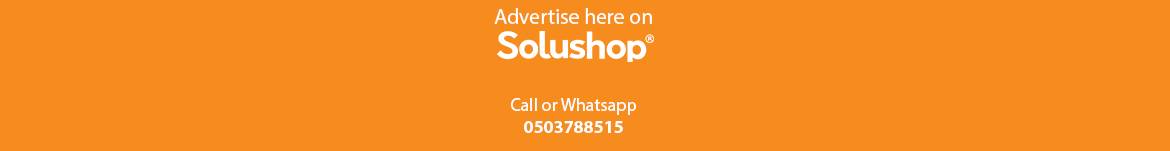
<style>
.page{position:relative;width:1170px;height:151px;background:#f68b1e}
.page>*{position:absolute;margin:0}
.t1{font:21.7px "MyriadPro-Regular";color:#ffffff}
.t2{font:18.1px "MyriadPro-Regular";color:#ffffff}
.t3{font:18.1px "MyriadPro-Bold";color:#ffffff}
</style>
<div class="page">
<p class="t1" style="left:494px;top:8px;width:158px;height:16px">Advertise here on</p>
<p class="t2" style="left:511px;top:98px;width:125px;height:35px;text-align:center">Call or Whatsapp<br><span class="t3">0503788515</span></p>
</div>
